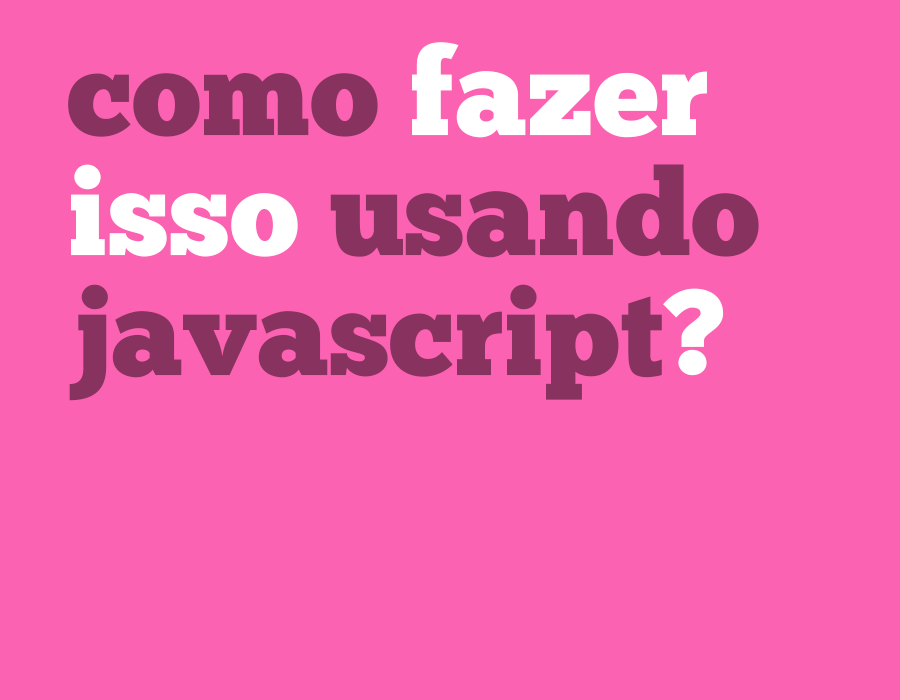
<style>
.page{position:relative;width:900px;height:700px;background:#fc62b2}
.page>*{position:absolute;margin:0}
.t1{font:120.7px/120px "ChunkFive-Roman";color:#88335f}
.t2{font:120.7px/120px "ChunkFive-Roman";color:#ffffff}
</style>
<div class="page">
<p class="t1" style="left:68px;top:42px;width:691px;height:359px">como <span class="t2">fazer<br>isso </span>usando<br>javascript<span class="t2">?</span></p>
</div>
